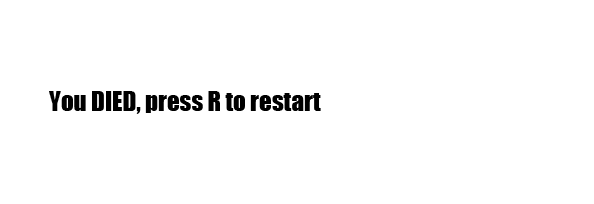
<style>
.page{position:relative;width:594px;height:204px;background:#ffffff}
.page>*{position:absolute;margin:0}
.t1{font:25px "Impact";color:#000000}
</style>
<div class="page">
<p class="t1" style="left:49px;top:91px;width:272px;height:23px">You DIED, press R to restart</p>
</div>
